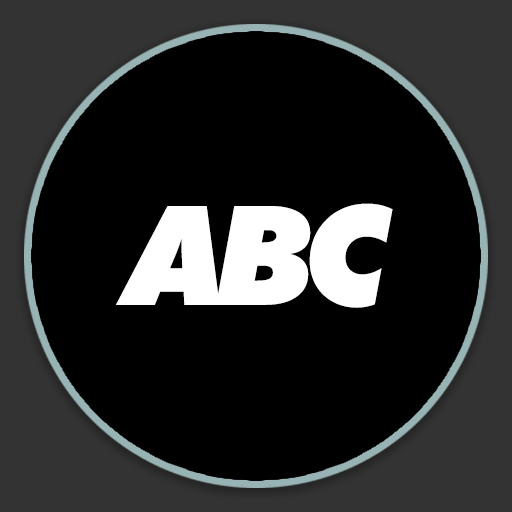
<style>
.page{position:relative;width:512px;height:512px;background:#000000}
.page>*{position:absolute;margin:0}
.t1{font:138px "FuturaBT-ExtraBlackItalic";letter-spacing:-0.06em;color:#ffffff}
</style>
<div class="page">
<p class="t1" style="left:116px;top:203px;width:277px;height:105px">ABC</p>
</div>
